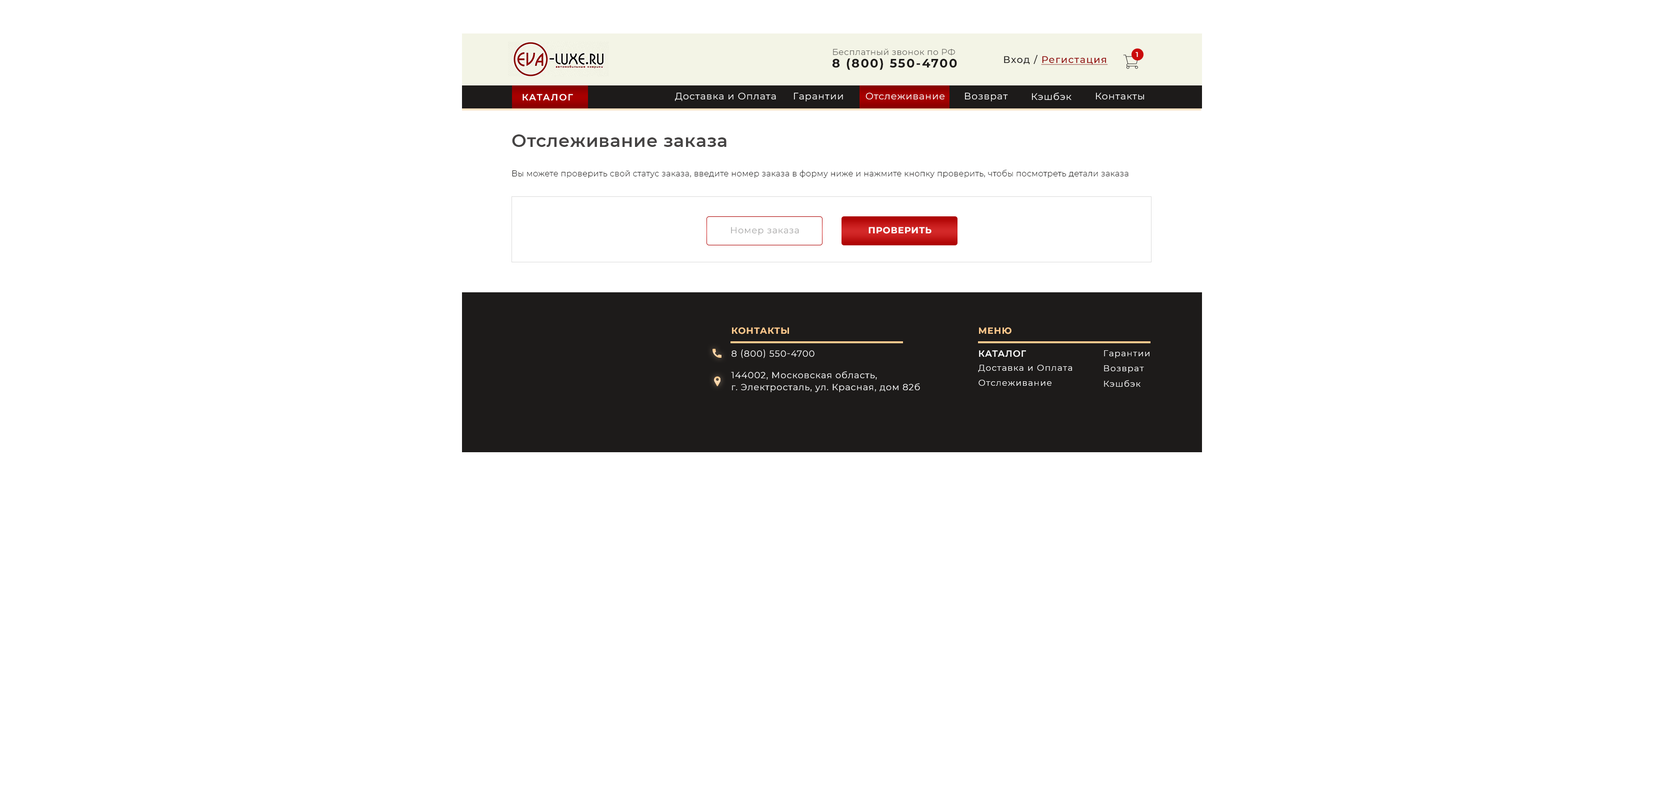
<style>
.page{position:relative;width:1664px;height:790px;background:#ffffff}
.page>*{position:absolute;margin:0}
.t1{font:8.5px "Montserrat-Regular";letter-spacing:0.025em;color:#5f5e59}
.t2{font:7px "Montserrat-SemiBold";letter-spacing:0.075em;color:#ffffff}
.t3{font:12px "Montserrat-Bold";letter-spacing:0.1em;color:#1d1b1a}
.t4{font:9.5px "Montserrat-Medium";letter-spacing:0.075em;color:#900000;text-decoration:underline}
.t5{font:9.5px "Montserrat-Medium";letter-spacing:0.075em;color:#1d1b1a}
.t6{font:9px "Montserrat-SemiBold";letter-spacing:0.1em;color:#ffffff;text-transform:uppercase}
.t7{font:9.5px "Montserrat-Regular";letter-spacing:0.05em;color:#ffffff}
.t8{font:17.5px "Montserrat-SemiBold";letter-spacing:0.025em;color:#454343}
.t9{font:8px "Montserrat-Light";letter-spacing:0.025em;color:#1d1b1a}
.t10{font:9px "Montserrat-Regular";letter-spacing:0.05em;color:#a09f9f}
.t11{font:9px "Montserrat-Bold";letter-spacing:0.05em;color:#ffffff;text-transform:uppercase}
.t12{font:9px "Montserrat-Bold";letter-spacing:0.05em;color:#ffc98d;text-transform:uppercase}
.t13{font:9px "Montserrat-Regular";letter-spacing:0.05em;color:#ffffff;text-transform:uppercase}
.t14{font:9px "Montserrat-SemiBold";letter-spacing:0.05em;color:#ffffff;text-transform:uppercase}
.t15{font:8.5px "Montserrat-Regular";letter-spacing:0.075em;color:#ffffff}
.t16{font:9px/12px "Montserrat-Regular";letter-spacing:0.05em;color:#ffffff}
</style>
<div class="page">
<p class="t1" style="left:833px;top:48px;width:122px;height:8px">Бесплатный звонок по РФ</p>
<p class="t2" style="left:1136px;top:52px;width:2px;height:5px">1</p>
<p class="t3" style="left:832px;top:58px;width:125px;height:12px">8 (800) 550-4700</p>
<p class="t4" style="left:1004px;top:55px;width:104px;height:10px"><span class="t5">Вход / </span>Регистация</p>
<p class="t6" style="left:522px;top:94px;width:51px;height:7px">Каталог</p>
<p class="t7" style="left:675px;top:92px;width:101px;height:9px">Доставка и Оплата</p>
<p class="t7" style="left:794px;top:92px;width:49px;height:10px">Гарантии</p>
<p class="t7" style="left:866px;top:92px;width:78px;height:8px">Отслеживание</p>
<p class="t7" style="left:965px;top:92px;width:43px;height:10px">Возврат</p>
<p class="t7" style="left:1032px;top:92px;width:40px;height:8px">Кэшбэк</p>
<p class="t7" style="left:1096px;top:92px;width:48px;height:8px">Контакты</p>
<p class="t8" style="left:512px;top:134px;width:214px;height:13px">Отслеживание заказа</p>
<p class="t9" style="left:512px;top:170px;width:616px;height:8px">Вы можете проверить свой статус заказа, введите номер заказа в форму ниже и нажмите кнопку проверить, чтобы посмотреть детали заказа</p>
<p class="t10" style="left:731px;top:227px;width:68px;height:9px">Номер заказа</p>
<p class="t11" style="left:868px;top:227px;width:64px;height:7px">Проверить</p>
<p class="t12" style="left:732px;top:328px;width:57px;height:6px">КОНТАКТЫ</p>
<p class="t12" style="left:979px;top:328px;width:33px;height:6px">МЕню</p>
<p class="t13" style="left:732px;top:350px;width:82px;height:8px">8 (800) 550-4700</p>
<p class="t14" style="left:979px;top:350px;width:47px;height:8px">Каталог</p>
<p class="t15" style="left:1104px;top:350px;width:46px;height:8px">Гарантии</p>
<p class="t15" style="left:978px;top:365px;width:94px;height:7px">Доставка и Оплата</p>
<p class="t15" style="left:1104px;top:366px;width:40px;height:8px">Возврат</p>
<p class="t16" style="left:731px;top:372px;width:189px;height:20px">144002, Московская область, <br>г. Электросталь, ул. Красная, дом 82б</p>
<p class="t15" style="left:978px;top:380px;width:74px;height:6px">Отслеживание</p>
<p class="t15" style="left:1104px;top:380px;width:36px;height:7px">Кэшбэк</p>
</div>
